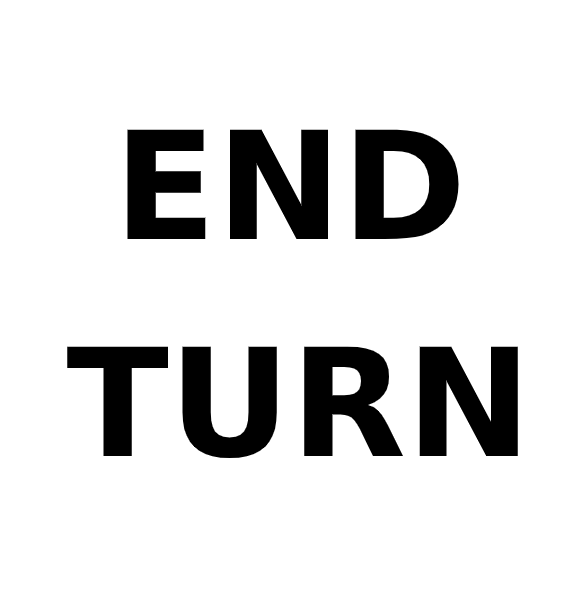
<style>
.page{position:relative;width:585px;height:609px;background:#ffffff}
.page>*{position:absolute;margin:0}
.t1{font:150px "DejaVuSans-Bold";color:#000000;text-transform:uppercase}
</style>
<div class="page">
<p class="t1" style="left:127px;top:129px;width:332px;height:110px">End</p>
<p class="t1" style="left:67px;top:346px;width:451px;height:113px">Turn</p>
</div>
